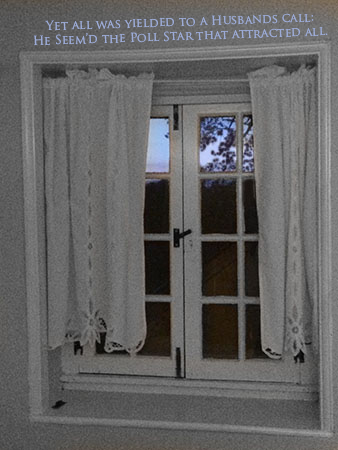
<style>
.page{position:relative;width:338px;height:450px}
.page>*{position:absolute;margin:0}
.t1{font:12px "TrajanPro-Regular";color:#9dacd8}
</style>
<div class="page">
<p class="t1" style="left:33px;top:13px;width:295px;height:33px;text-align:center;rotate:-2deg">Yet all was yielded to a Husbands call:<br>He Seem’d the Poll Star that attracted all.</p>
</div>
